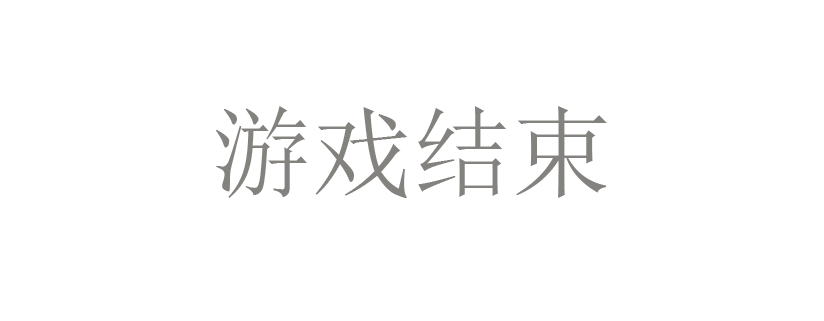
<style>
.page{position:relative;width:824px;height:321px;background:#ffffff}
.page>*{position:absolute;margin:0}
.t1{font:100px "SimSun";color:#84827e}
</style>
<div class="page">
<p class="t1" style="left:216px;top:106px;width:391px;height:92px">游戏结束</p>
</div>
